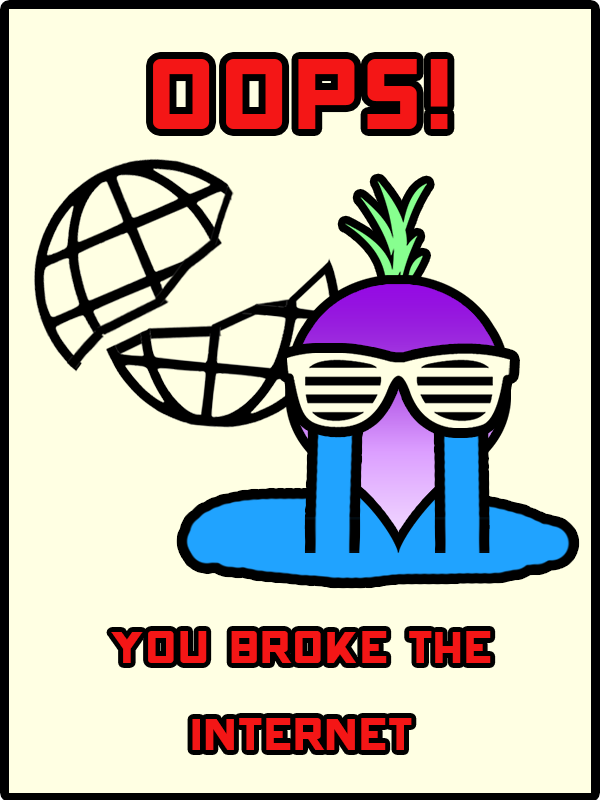
<style>
.page{position:relative;width:600px;height:800px;background:#ffffe3}
.page>*{position:absolute;margin:0}
.t1{font:159.2px "ONRAMP";color:#f41616}
.t2{font:72px "ONRAMP";color:#f41616}
</style>
<div class="page">
<p class="t1" style="left:153px;top:59px;width:295px;height:70px">oops!</p>
<p class="t2" style="left:111px;top:631px;width:380px;height:119px;text-align:center">you broke the<br>internet</p>
</div>
